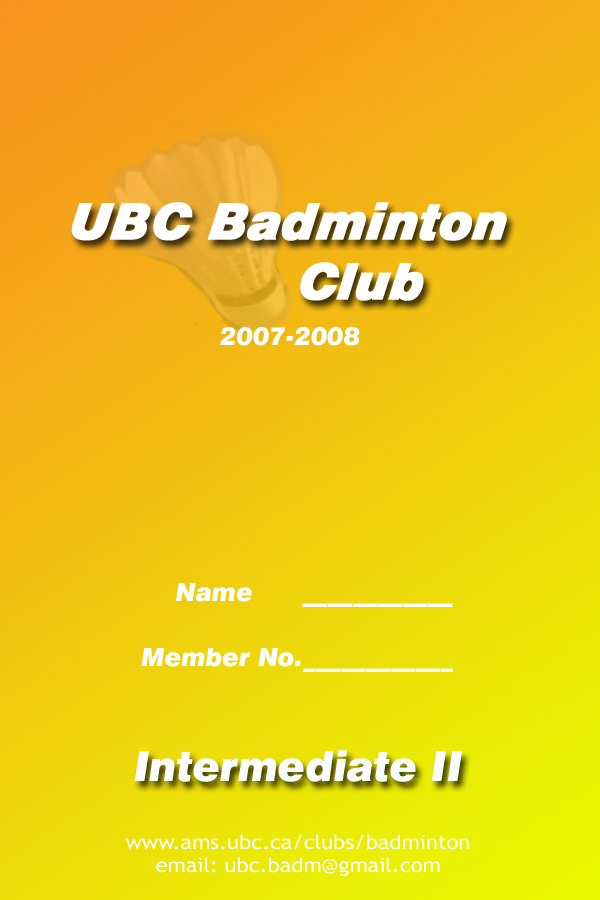
<style>
.page{position:relative;width:600px;height:900px}
.page>*{position:absolute;margin:0}
.t1{font:25px "Swiss721BT-BlackItalic";color:#f9fdfe}
.t2{font:41.7px "Swiss721BT-BlackItalic";color:#f9fdfe}
.t3{font:19.8px "TrebuchetMS";color:#f9fdfe;scale:1.1 1}
</style>
<div class="page">
<p class="t1" style="left:220px;top:327px;width:140px;height:19px">2007-2008</p>
<p class="t1" style="left:176px;top:583px;width:277px;height:24px">Name      ____________</p>
<p class="t1" style="left:141px;top:648px;width:312px;height:24px">Member No.____________</p>
<p class="t2" style="left:134px;top:750px;width:328px;height:32px">Intermediate II</p>
<p class="t3" style="left:125px;top:834px;width:344px;height:42px;text-align:center">www.ams.ubc.ca/clubs/badminton<br>email: ubc.badm@gmail.com</p>
</div>
